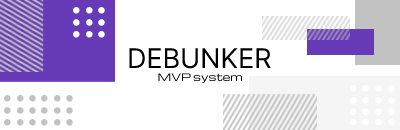
<style>
.page{position:relative;width:400px;height:130px;background:#ffffff}
.page>*{position:absolute;margin:0}
.t1{font:27px "Inter-Regular";color:#000000}
.t2{font:10px "Michroma";color:#000000}
</style>
<div class="page">
<p class="t1" style="left:129px;top:48px;width:142px;height:21px">DEBUNKER</p>
<p class="t2" style="left:158px;top:73px;width:84px;height:10px">MVP system</p>
</div>
